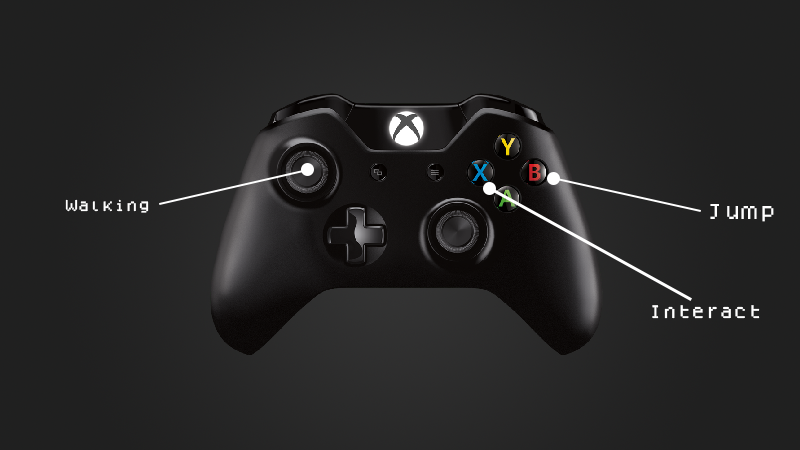
<style>
.page{position:relative;width:800px;height:450px}
.page>*{position:absolute;margin:0}
.t1{font:12.4px "Dogica";letter-spacing:-0.025em;color:#ffffff}
.t2{font:17.1px "Dogica";letter-spacing:-0.025em;color:#ffffff}
.t3{font:14.5px "Dogica";letter-spacing:-0.025em;color:#ffffff}
</style>
<div class="page">
<p class="t1" style="left:65px;top:199px;width:84px;height:14px">Walking</p>
<p class="t2" style="left:710px;top:204px;width:64px;height:18px">Jump</p>
<p class="t3" style="left:652px;top:305px;width:108px;height:14px">Interact</p>
</div>
